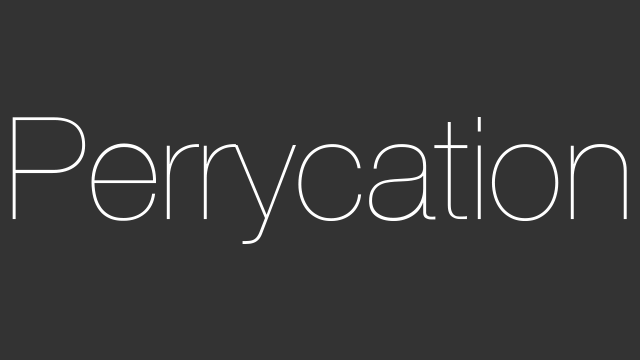
<style>
.page{position:relative;width:640px;height:360px;background:#333333}
.page>*{position:absolute;margin:0}
.t1{font:143.4px "HelveticaNeue-UltraLight";color:#ffffff}
</style>
<div class="page">
<p class="t1" style="left:12px;top:117px;width:615px;height:127px">Perrycation</p>
</div>
